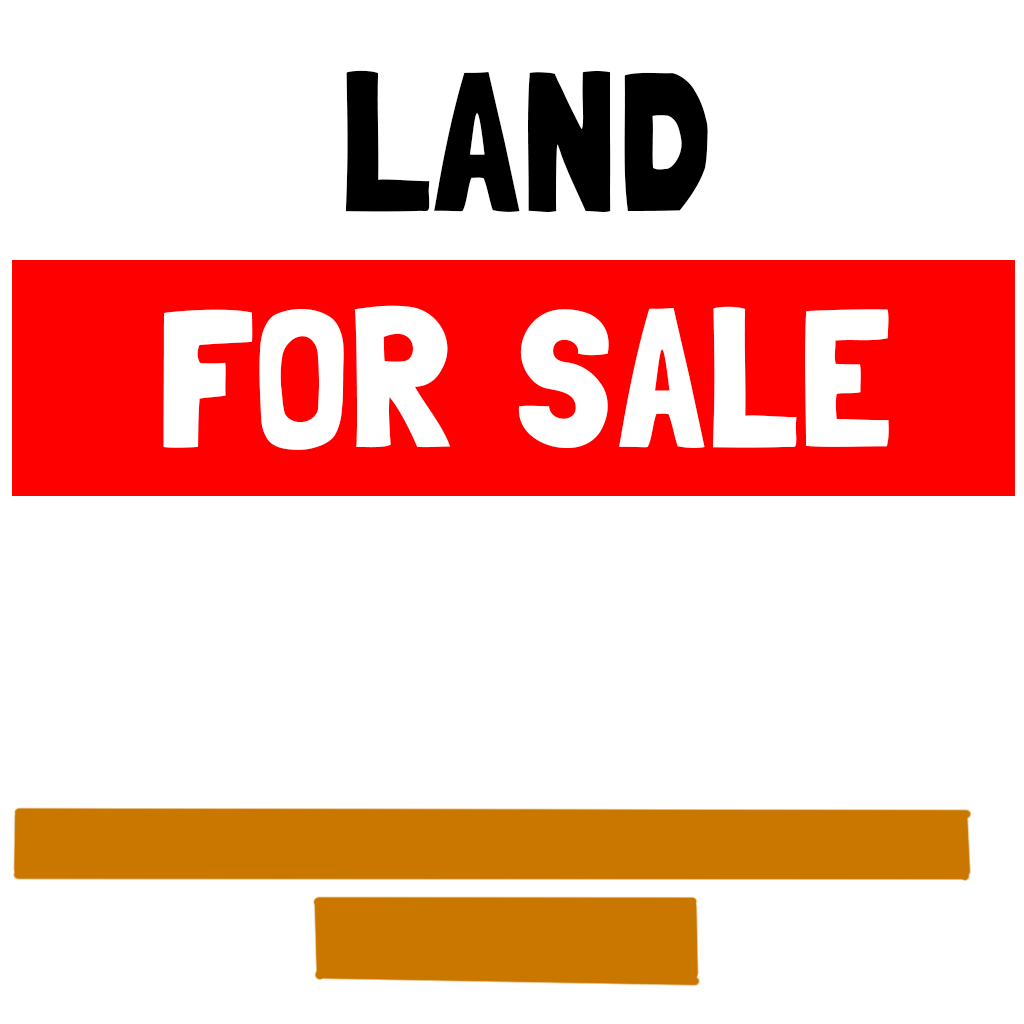
<style>
.page{position:relative;width:1024px;height:1024px;background:#ffffff}
.page>*{position:absolute;margin:0}
.t1{font:196.9px "LondrinaSolid-Regular";color:#ffffff}
.t2{font:196.9px "LondrinaSolid-Regular";color:#000000}
</style>
<div class="page">
<p class="t1" style="left:163px;top:70px;width:726px;height:380px;text-align:center"><span class="t2">LAND<br></span>FOR SALE</p>
</div>
